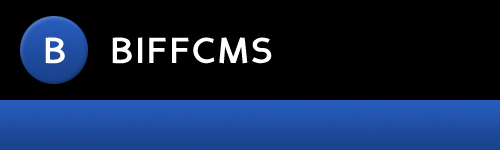
<style>
.page{position:relative;width:500px;height:150px;background:#000000}
.page>*{position:absolute;margin:0}
.t1{font:36px "PerspectiveSansBold";letter-spacing:0.05em;color:#ffffff}
</style>
<div class="page">
<p class="t1" style="left:112px;top:37px;width:160px;height:27px">BIFFCMS</p>
</div>
